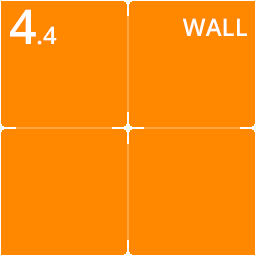
<style>
.page{position:relative;width:256px;height:256px;background:#ff8800}
.page>*{position:absolute;margin:0}
.t1{font:24px "OpenSans-Semibold";color:#ffffff}
.t2{font:48px "OpenSans-Semibold";color:#ffffff}
</style>
<div class="page">
<p class="t1" style="left:10px;top:9px;width:47px;height:36px"><span class="t2">4</span>.4</p>
<p class="t1" style="left:183px;top:18px;width:64px;height:18px">WALL</p>
</div>
